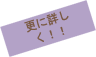
<style>
.page{position:relative;width:96px;height:57px;background:#ffffff}
.page>*{position:absolute;margin:0}
.t1{font:11.9px "MS-Gothic";color:#7a5a44;scale:0.97 1}
</style>
<div class="page">
<p class="t1" style="left:24px;top:11px;width:45px;height:31px;rotate:-17deg">更に詳しく！！</p>
</div>
